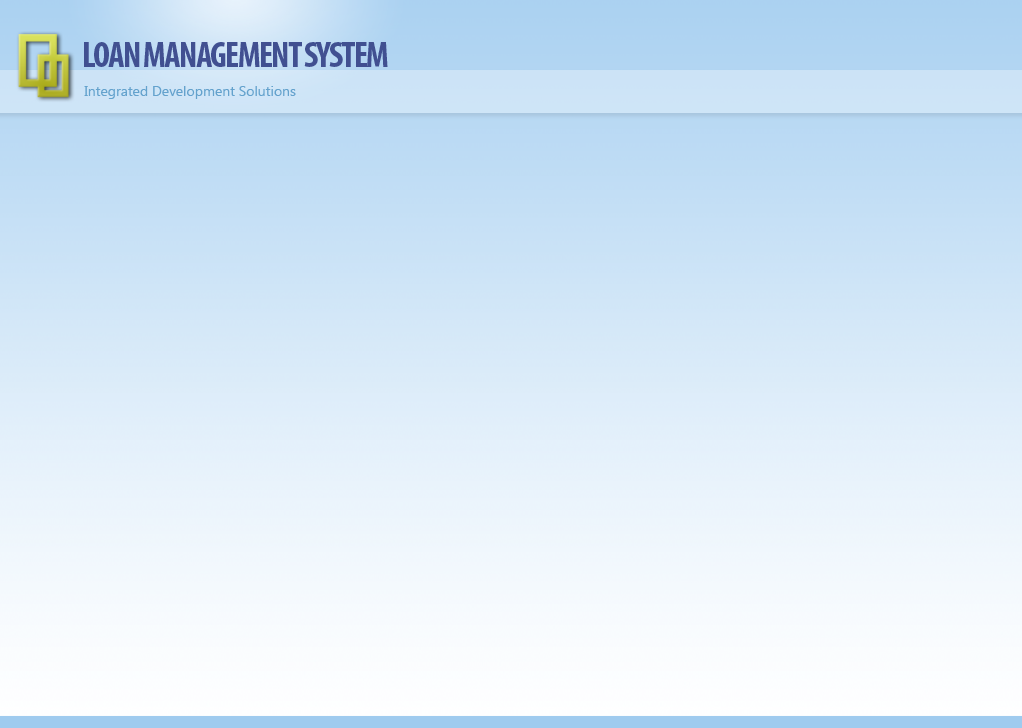
<style>
.page{position:relative;width:1022px;height:728px}
.page>*{position:absolute;margin:0}
.t1{font:36px "MyriadPro-BoldCond";letter-spacing:-0.05em;color:#415091}
.t2{font:14px "SegoeUI";color:#64a2cd}
</style>
<div class="page">
<p class="t1" style="left:84px;top:42px;width:304px;height:25px">LOAN MANAGEMENT SYSTEM</p>
<p class="t2" style="left:84px;top:86px;width:212px;height:13px">Integrated Development Solutions</p>
</div>
